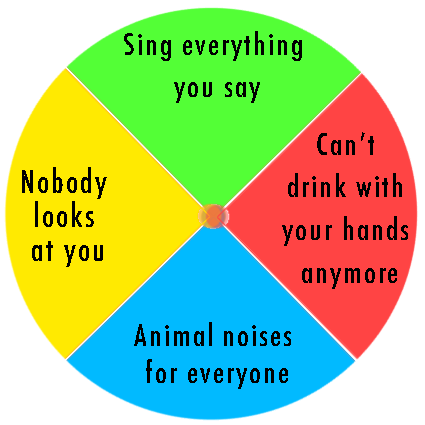
<style>
.page{position:relative;width:425px;height:425px;background:#ffffff}
.page>*{position:absolute;margin:0}
.t1{font:29.3px/42.6px "Futura-CondensedMedium";letter-spacing:0.065em;color:#000000;scale:1.05 1}
.t2{font:30.8px/34.3px "Futura-CondensedMedium";letter-spacing:0.065em;color:#000000;scale:1.05 1}
.t3{font:29.3px/37.1px "Futura-CondensedMedium";letter-spacing:0.065em;color:#000000;scale:1.05 1}
</style>
<div class="page">
<p class="t1" style="left:124px;top:31px;width:178px;height:72px;text-align:center">Sing everything<br> you say</p>
<p class="t1" style="left:282px;top:132px;width:126px;height:157px;text-align:center">Can’t <br>drink with <br>your hands <br>anymore</p>
<p class="t2" style="left:22px;top:167px;width:85px;height:100px;text-align:center">Nobody <br>looks <br>at you</p>
<p class="t3" style="left:134px;top:322px;width:157px;height:67px;text-align:center">Animal noises <br>for everyone</p>
</div>
